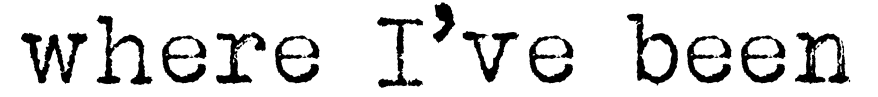
<style>
.page{position:relative;width:878px;height:97px;background:#ffffff}
.page>*{position:absolute;margin:0}
.t1{font:100px "Albertsthal-Typewriter";color:#000000}
</style>
<div class="page">
<p class="t1" style="left:21px;top:2px;width:830px;height:86px">where I’ve been</p>
</div>
